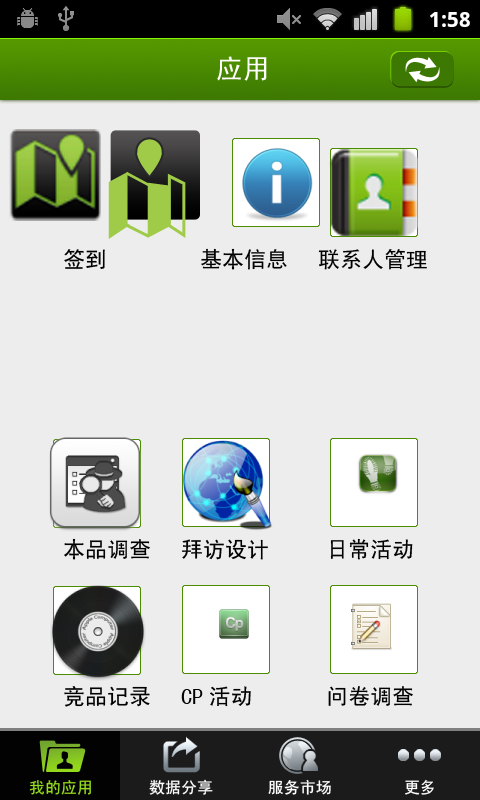
<style>
.page{position:relative;width:480px;height:800px;background:#eeeded}
.page>*{position:absolute;margin:0}
.t1{font:27px "SimHei";color:#ffffff}
.t2{font:22px "SimHei";color:#000000}
.t3{font:16px "SimHei";color:#94db1c}
.t4{font:16px "SimHei";color:#ffffff}
</style>
<div class="page">
<p class="t1" style="left:217px;top:56px;width:50px;height:25px">应用</p>
<p class="t2" style="left:64px;top:249px;width:41px;height:20px">签到</p>
<p class="t2" style="left:201px;top:248px;width:86px;height:22px">基本信息</p>
<p class="t2" style="left:318px;top:249px;width:109px;height:21px">联系人管理</p>
<p class="t2" style="left:64px;top:538px;width:86px;height:22px">本品调查</p>
<p class="t2" style="left:182px;top:539px;width:86px;height:21px">拜访设计</p>
<p class="t2" style="left:330px;top:538px;width:83px;height:22px">日常活动</p>
<p class="t2" style="left:64px;top:686px;width:86px;height:21px">竞品记录</p>
<p class="t2" style="left:181px;top:686px;width:70px;height:21px">CP活动</p>
<p class="t2" style="left:328px;top:686px;width:85px;height:20px">问卷调查</p>
<p class="t3" style="left:29px;top:780px;width:62px;height:15px">我的应用</p>
<p class="t4" style="left:149px;top:779px;width:64px;height:16px">数据分享</p>
<p class="t4" style="left:268px;top:779px;width:63px;height:16px">服务市场</p>
<p class="t4" style="left:405px;top:779px;width:29px;height:16px">更多</p>
</div>
